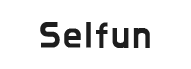
<style>
.page{position:relative;width:191px;height:69px;background:#ffffff}
.page>*{position:absolute;margin:0}
.t1{font:30px "BMDoHyeon";letter-spacing:0.08em;color:#1d1d1d}
</style>
<div class="page">
<p class="t1" style="left:40px;top:22px;width:110px;height:26px">Selfun</p>
</div>
